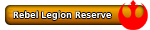
<style>
.page{position:relative;width:150px;height:30px;background:#ffffff}
.page>*{position:absolute;margin:0}
.t1{font:9px "DejaVuSansCondensed-Bold";color:#ffffff}
</style>
<div class="page">
<p class="t1" style="left:13px;top:11px;width:99px;height:9px">Rebel Legion Reserve</p>
</div>
